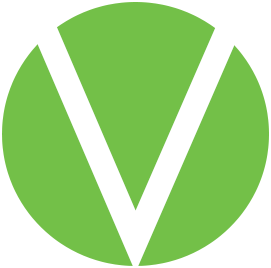
<style>
.page{position:relative;width:271px;height:268px;background:#73c048}
.page>*{position:absolute;margin:0}
.t1{font:340px "CenturyGothic";color:#ffffff}
</style>
<div class="page">
<p class="t1" style="left:28px;top:22px;width:217px;height:244px">V</p>
</div>
